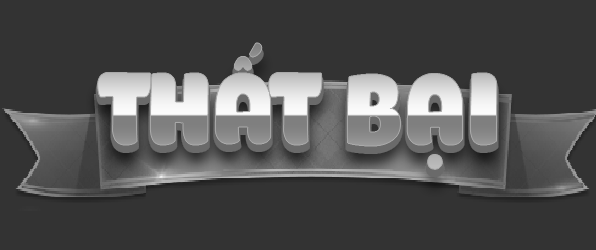
<style>
.page{position:relative;width:596px;height:250px;background:#333333}
.page>*{position:absolute;margin:0}
.t1{font:100.9px "iCielPony";letter-spacing:0.05em;scale:0.87 1}
</style>
<div class="page">
<p class="t1" style="left:97px;top:43px;width:400px;height:127px">THẤT BẠI</p>
</div>
